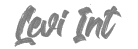
<style>
.page{position:relative;width:138px;height:49px;background:#ffffff}
.page>*{position:absolute;margin:0}
.t1{font:35.2px "DarkCrowItalicPERSONALUSE";letter-spacing:-0.025em;color:#7b7b7b}
</style>
<div class="page">
<p class="t1" style="left:14px;top:4px;width:108px;height:43px">Levi Int</p>
</div>
